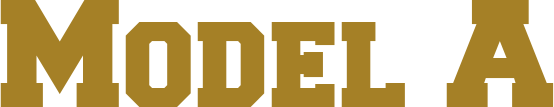
<style>
.page{position:relative;width:554px;height:107px;background:#a58026}
.page>*{position:absolute;margin:0}
.t1{font:128px "Freshman";color:#a58026}
</style>
<div class="page">
<p class="t1" style="left:0px;top:0px;width:554px;height:107px">Model A</p>
</div>
